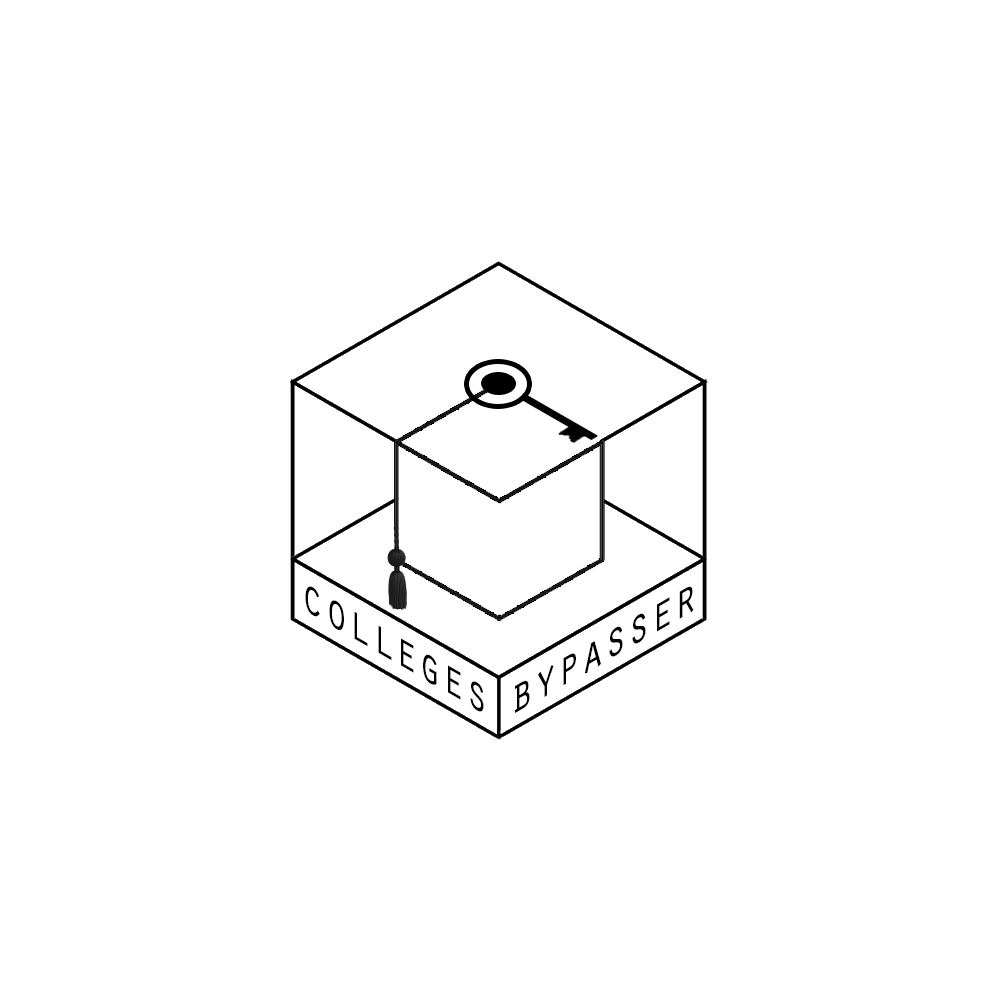
<style>
.page{position:relative;width:1000px;height:1000px;background:#ffffff}
.page>*{position:absolute;margin:0}
.t1{font:52px "OratorStd";color:#000000;scale:0.87 1}
</style>
<div class="page">
<p class="t1" style="left:305px;top:586px;width:179px;height:126px;rotate:30deg">colleges</p>
<p class="t1" style="left:514px;top:586px;width:180px;height:128px;rotate:-30deg">bypasser</p>
</div>
